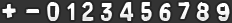
<style>
.page{position:relative;width:232px;height:23px;background:#333333}
.page>*{position:absolute;margin:0}
.t1{font:24px "Dreamofme";letter-spacing:0.3em;color:#ffffff}
</style>
<div class="page">
<p class="t1" style="left:2px;top:2px;width:228px;height:19px">+-0123456789</p>
</div>
